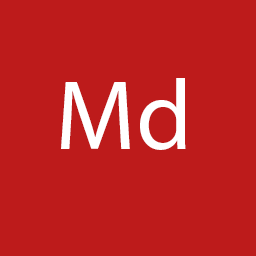
<style>
.page{position:relative;width:256px;height:256px;background:#bd1b1b}
.page>*{position:absolute;margin:0}
.t1{font:100px "MyriadPro-Regular";color:#ffffff}
</style>
<div class="page">
<p class="t1" style="left:61px;top:78px;width:125px;height:72px">Md</p>
</div>
